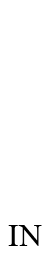
<style>
.page{position:relative;width:50px;height:269px;background:#ffffff}
.page>*{position:absolute;margin:0}
.t1{font:48px "AngsanaNew";color:#000000}
</style>
<div class="page">
<p class="t1" style="left:8px;top:225px;width:34px;height:21px">IN</p>
</div>
